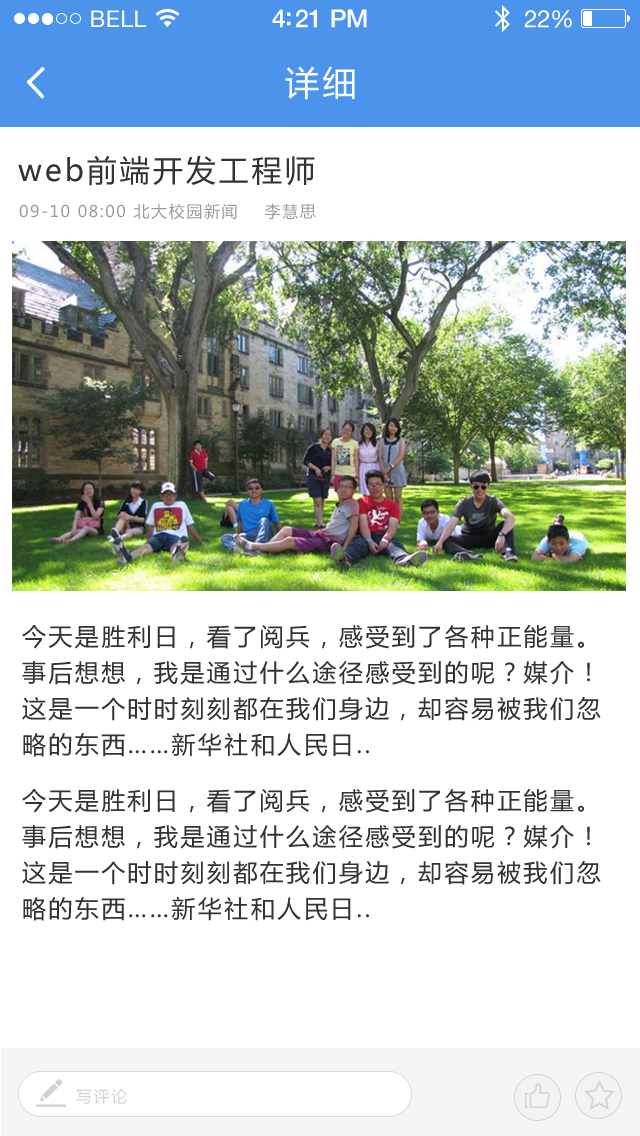
<style>
.page{position:relative;width:640px;height:1136px;background:#ffffff}
.page>*{position:absolute;margin:0}
.t1{font:23px "HelveticaNeue";letter-spacing:0.02em;color:#ffffff}
.t2{font:25px "HelveticaNeue-Medium";letter-spacing:-0.02em;color:#ffffff}
.t3{font:24px "HelveticaNeue";letter-spacing:-0.02em;color:#ffffff}
.t4{font:34px "MicrosoftYaHei";letter-spacing:0.1em;color:#ffffff}
.t5{font:30px "MicrosoftYaHei";letter-spacing:0.1em;color:#333333}
.t6{font:16px "MicrosoftYaHei";letter-spacing:0.1em;color:#9a9a9a}
.t7{font:24px/36px "MicrosoftYaHei";letter-spacing:0.1em;color:#333333}
.t8{font:16px "MicrosoftYaHei";letter-spacing:0.1em;color:#d2d2d2}
</style>
<div class="page">
<p class="t1" style="left:91px;top:10px;width:56px;height:17px">BELL</p>
<p class="t2" style="left:272px;top:9px;width:95px;height:19px">4:21 PM</p>
<p class="t3" style="left:524px;top:10px;width:48px;height:18px">22%</p>
<p class="t4" style="left:285px;top:66px;width:70px;height:34px">详细</p>
<p class="t5" style="left:18px;top:155px;width:297px;height:31px">web前端开发工程师</p>
<p class="t6" style="left:19px;top:203px;width:297px;height:17px">09-10 08:00 北大校园新闻    李慧思</p>
<p class="t7" style="left:22px;top:624px;width:579px;height:133px">今天是胜利日，看了阅兵，感受到了各种正能量。<br>事后想想，我是通过什么途径感受到的呢？媒介！<br>这是一个时时刻刻都在我们身边，却容易被我们忽<br>略的东西……新华社和人民日..</p>
<p class="t7" style="left:22px;top:788px;width:579px;height:133px">今天是胜利日，看了阅兵，感受到了各种正能量。<br>事后想想，我是通过什么途径感受到的呢？媒介！<br>这是一个时时刻刻都在我们身边，却容易被我们忽<br>略的东西……新华社和人民日..</p>
<p class="t8" style="left:76px;top:1088px;width:52px;height:16px">写评论</p>
</div>
